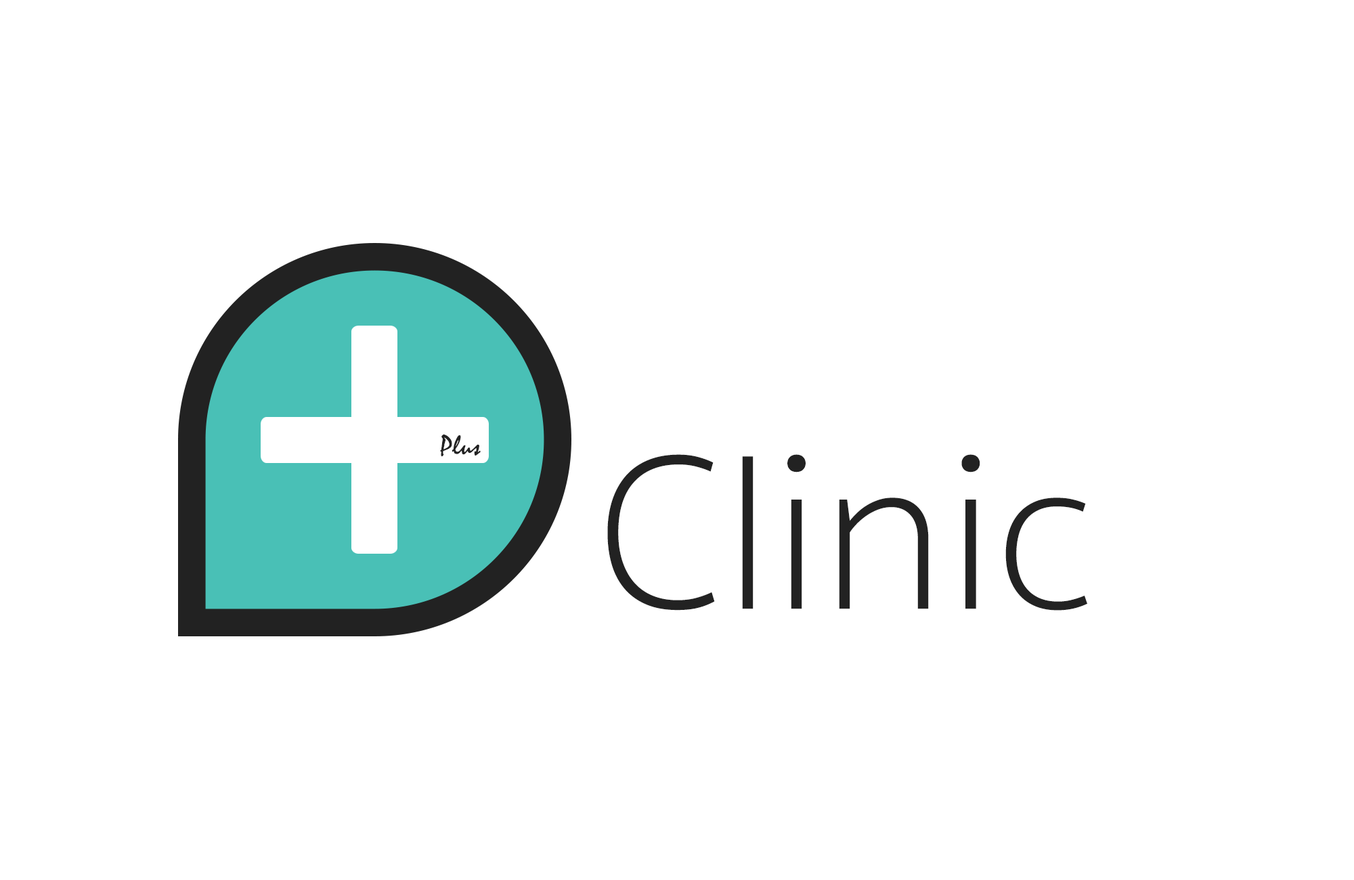
<style>
.page{position:relative;width:1354px;height:880px;background:#ffffff}
.page>*{position:absolute;margin:0}
.t1{font:28.2px "Mistral";color:#222222}
.t2{font:225.7px "SukhumvitSet-Thin";color:#222222}
</style>
<div class="page">
<p class="t1" style="left:440px;top:434px;width:41px;height:23px">Plus</p>
<p class="t2" style="left:607px;top:454px;width:481px;height:157px">Clinic</p>
</div>
